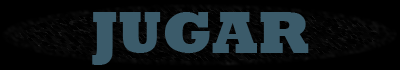
<style>
.page{position:relative;width:400px;height:70px;background:#000000}
.page>*{position:absolute;margin:0}
.t1{font:60px "Rockwell-ExtraBold";color:#3b5b6a}
</style>
<div class="page">
<p class="t1" style="left:92px;top:12px;width:217px;height:53px">JUGAR</p>
</div>
